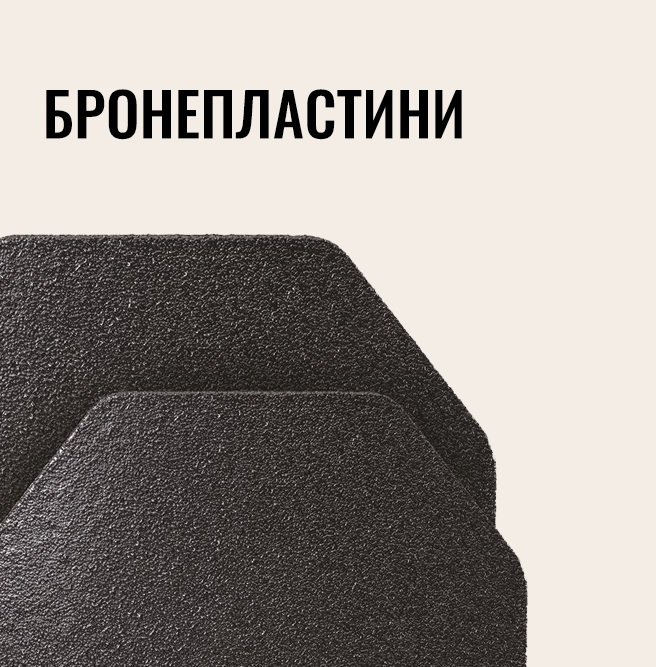
<style>
.page{position:relative;width:656px;height:667px;background:#f4ede5}
.page>*{position:absolute;margin:0}
.t1{font:60px "Oswald-Medium";color:#000000}
</style>
<div class="page">
<p class="t1" style="left:46px;top:89px;width:416px;height:51px">БРОНЕПЛАСТИНИ</p>
</div>
